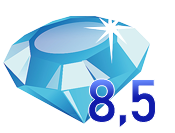
<style>
.page{position:relative;width:175px;height:133px;background:#ffffff}
.page>*{position:absolute;margin:0}
.t1{font:60px "Bahnschrift-SemiBold";letter-spacing:-0.05em}
</style>
<div class="page">
<p class="t1" style="left:88px;top:79px;width:68px;height:49px">8,5</p>
</div>
